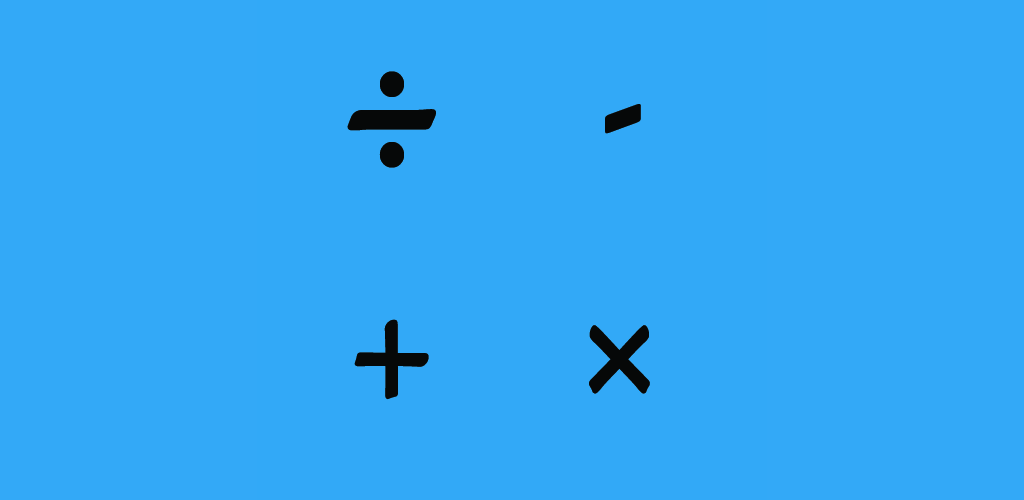
<style>
.page{position:relative;width:1024px;height:500px;background:#33a9f7}
.page>*{position:absolute;margin:0}
.t1{font:200px "GoudyStout";color:#060808;scale:0.93 1}
.t2{font:200px "GoudyOldStyleT-Bold";color:#060808;scale:0.93 1}
</style>
<div class="page">
<p class="t1" style="left:347px;top:71px;width:89px;height:97px">÷</p>
<p class="t2" style="left:605px;top:104px;width:36px;height:30px">-</p>
<p class="t2" style="left:354px;top:319px;width:75px;height:81px">+</p>
<p class="t2" style="left:589px;top:325px;width:61px;height:69px">×</p>
</div>
